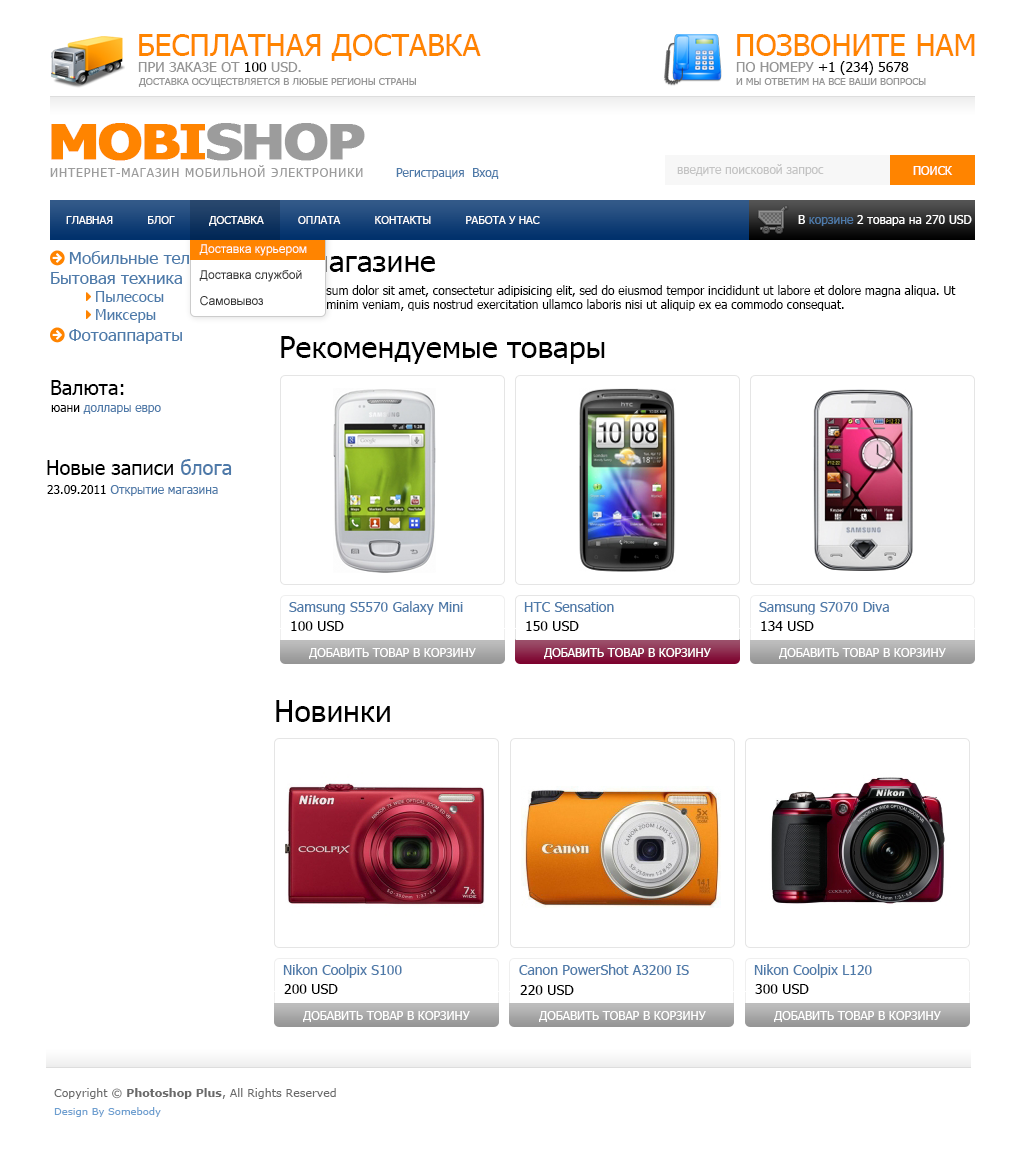
<style>
.page{position:relative;width:1024px;height:1151px;background:#ffffff}
.page>*{position:absolute;margin:0}
.t1{font:30px "Tahoma";color:#ff8400;text-transform:uppercase}
.t2{font:14px "Tahoma";color:#959595;text-transform:uppercase}
.t3{font:14px "Tahoma";color:#000000;text-transform:uppercase}
.t4{font:10px "Tahoma";color:#959595;text-transform:uppercase}
.t5{font:48px "Tahoma-Bold";letter-spacing:-0.05em;color:#ff8400;text-transform:uppercase;font-weight:bold;scale:1.2 1}
.t6{font:48px "Tahoma-Bold";letter-spacing:-0.05em;color:#9c9c9c;text-transform:uppercase;font-weight:bold;scale:1.2 1}
.t7{font:12px "Tahoma";letter-spacing:0.08em;color:#9c9c9c;text-transform:uppercase}
.t8{font:12px "Tahoma";color:#4e7aa9}
.t9{font:12px "Tahoma";color:#c4c4c4}
.t10{font:12px "Tahoma";color:#ffffff;text-transform:uppercase}
.t11{font:11px "Tahoma";color:#ffffff;text-transform:uppercase}
.t12{font:12px "Tahoma";color:#ffffff}
.t13{font:12px "ArialMT";color:#fefefe}
.t14{font:30px "Tahoma";color:#000000}
.t15{font:12px "Tahoma";color:#000000}
.t16{font:20px "Tahoma";color:#000000}
.t17{font:20px "Tahoma";color:#4e7aa9}
.t18{font:14px "Tahoma";color:#4e7aa9}
.t19{font:14px "Tahoma";color:#000000}
.t20{font:11px/18px "Verdana";color:#6a6a6a}
.t21{font:11px/18px "Verdana-Bold";color:#6a6a6a}
.t22{font:10px/18px "Verdana";color:#6e9fd0}
</style>
<div class="page">
<p class="t1" style="left:139px;top:34px;width:342px;height:27px">бесплатная доставка</p>
<p class="t1" style="left:737px;top:34px;width:238px;height:22px">Позвоните нам</p>
<p class="t2" style="left:138px;top:62px;width:163px;height:10px">при заказе от <span class="t3">100</span> USD.</p>
<p class="t3" style="left:736px;top:61px;width:173px;height:14px"><span class="t2">по номеру </span>+1 (234) 5678</p>
<p class="t4" style="left:138px;top:78px;width:278px;height:9px">доставка осуществляется в любые регионы cтраны</p>
<p class="t4" style="left:736px;top:78px;width:190px;height:7px">и мы ответим на все ваши вопросы</p>
<p class="t5" style="left:51px;top:123px;width:314px;height:38px">mobi<span class="t6">shop</span></p>
<p class="t7" style="left:50px;top:165px;width:313px;height:12px">интернет-магазин мобильной электроники</p>
<p class="t8" style="left:396px;top:168px;width:103px;height:11px">Регистрация  Вход</p>
<p class="t9" style="left:677px;top:164px;width:147px;height:12px">введите поисковой запрос</p>
<p class="t10" style="left:913px;top:166px;width:40px;height:9px">поиск</p>
<p class="t11" style="left:66px;top:216px;width:474px;height:10px">Главная          блог          доставка          оплата          контакты          работа у нас</p>
<p class="t12" style="left:798px;top:215px;width:174px;height:11px">В <span class="t8">корзине</span> 2 товара на 270 USD</p>
<p class="t13" style="left:199px;top:244px;width:108px;height:12px">Доставка курьером</p>
<p class="t14" style="left:280px;top:250px;width:155px;height:22px">О магазине</p>
<p class="t15" style="left:280px;top:285px;width:676px;height:26px">Lorem ipsum dolor sit amet, consectetur adipisicing elit, sed do eiusmod tempor incididunt ut labore et dolore magna aliqua. Ut enim ad minim veniam, quis nostrud exercitation ullamco laboris nisi ut aliquip ex ea commodo consequat.</p>
<p class="t14" style="left:281px;top:336px;width:324px;height:28px">Рекомендуемые товары</p>
<p class="t16" style="left:51px;top:380px;width:73px;height:15px">Валюта:</p>
<p class="t8" style="left:51px;top:405px;width:110px;height:9px"><span class="t15">юани</span> доллары евро</p>
<p class="t16" style="left:47px;top:459px;width:185px;height:16px">Новые записи <span class="t17">блога</span></p>
<p class="t8" style="left:47px;top:485px;width:171px;height:11px"><span class="t15">23.09.2011</span> Открытие магазина</p>
<p class="t18" style="left:289px;top:601px;width:174px;height:14px">Samsung S5570 Galaxy Mini</p>
<p class="t18" style="left:524px;top:602px;width:90px;height:10px">HTC Sensation</p>
<p class="t18" style="left:759px;top:602px;width:130px;height:13px">Samsung S7070 Diva</p>
<p class="t19" style="left:291px;top:621px;width:53px;height:10px">100 USD</p>
<p class="t19" style="left:526px;top:621px;width:53px;height:10px">150 USD</p>
<p class="t19" style="left:761px;top:621px;width:53px;height:10px">134 USD</p>
<p class="t10" style="left:309px;top:648px;width:167px;height:11px">добавить товар в корзину</p>
<p class="t10" style="left:544px;top:648px;width:167px;height:11px">добавить товар в корзину</p>
<p class="t10" style="left:779px;top:648px;width:167px;height:11px">добавить товар в корзину</p>
<p class="t14" style="left:276px;top:700px;width:114px;height:22px">Новинки</p>
<p class="t18" style="left:283px;top:964px;width:119px;height:14px">Nikon Coolpix S100</p>
<p class="t18" style="left:519px;top:964px;width:170px;height:11px">Canon PowerShot A3200 IS</p>
<p class="t18" style="left:754px;top:964px;width:118px;height:14px">Nikon Coolpix L120</p>
<p class="t19" style="left:284px;top:984px;width:54px;height:10px">200 USD</p>
<p class="t19" style="left:520px;top:985px;width:54px;height:10px">220 USD</p>
<p class="t19" style="left:755px;top:984px;width:54px;height:10px">300 USD</p>
<p class="t10" style="left:303px;top:1011px;width:167px;height:11px">добавить товар в корзину</p>
<p class="t10" style="left:539px;top:1011px;width:167px;height:11px">добавить товар в корзину</p>
<p class="t10" style="left:774px;top:1011px;width:167px;height:11px">добавить товар в корзину</p>
<p class="t20" style="left:54px;top:1088px;width:282px;height:29px;text-align:justify">Copyright © <span class="t21">Photoshop Plus</span>, All Rights Reserved<br><span class="t22">Design By Somebody</span></p>
</div>
